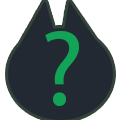
<style>
.page{position:relative;width:120px;height:120px;background:#232933}
.page>*{position:absolute;margin:0}
.t1{font:108.6px "MyriadPro-Regular";color:#11a457}
</style>
<div class="page">
<p class="t1" style="left:45px;top:31px;width:34px;height:75px">?</p>
</div>
